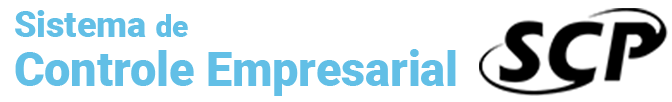
<style>
.page{position:relative;width:672px;height:102px;background:#ffffff}
.page>*{position:absolute;margin:0}
.t1{font:36px "Roboto-Black";color:#62bfe6}
.t2{font:30px "Roboto-Black";color:#62bfe6}
.t3{font:48px "Roboto-Black";color:#62bfe6}
</style>
<div class="page">
<p class="t1" style="left:15px;top:10px;width:173px;height:27px">Sistema <span class="t2">de</span></p>
<p class="t3" style="left:15px;top:49px;width:441px;height:47px">Controle Empresarial</p>
</div>
